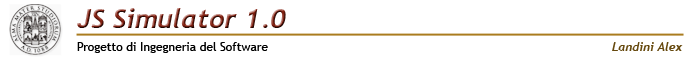
<style>
.page{position:relative;width:700px;height:60px;background:#ffffff}
.page>*{position:absolute;margin:0}
.t1{font:27px "Trebuchet-BoldItalic"}
.t2{font:12px "TrebuchetMS";color:#000000}
.t3{font:12px "Trebuchet-BoldItalic";color:#66490e}
</style>
<div class="page">
<p class="t1" style="left:77px;top:8px;width:209px;height:20px">JS Simulator 1.0</p>
<p class="t2" style="left:77px;top:42px;width:191px;height:11px">Progetto di Ingegneria del Software</p>
<p class="t3" style="left:612px;top:42px;width:71px;height:9px">Landini Alex</p>
</div>
